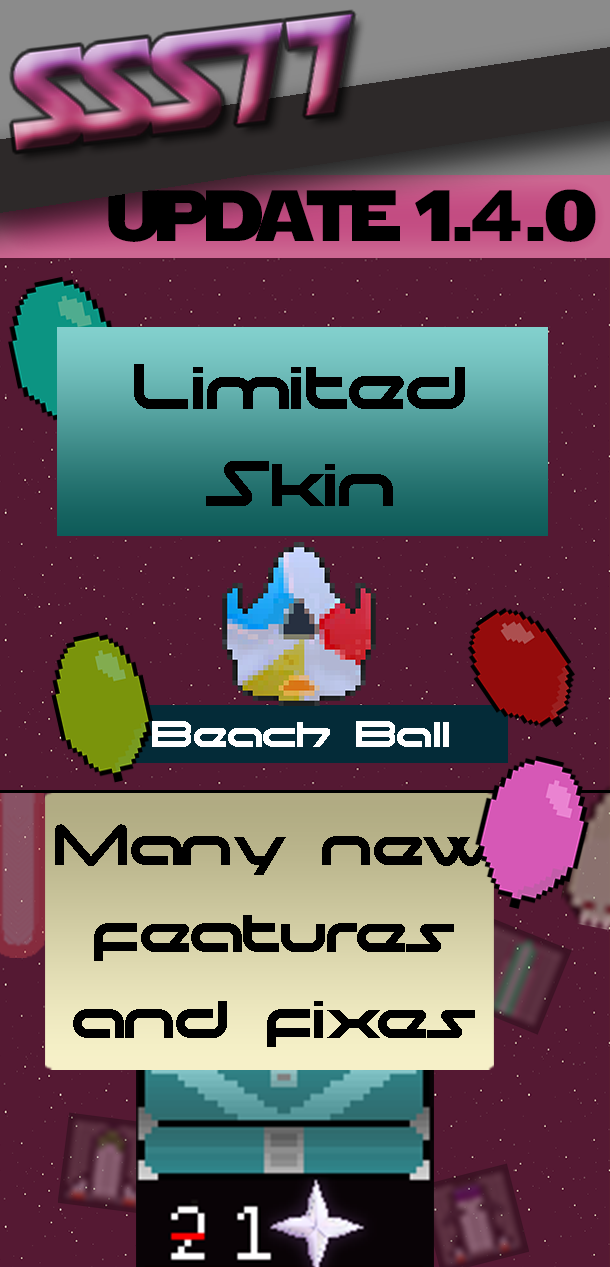
<style>
.page{position:relative;width:610px;height:1267px;background:#551933}
.page>*{position:absolute;margin:0}
.t1{font:72px "StarJedi";color:#000000}
.t2{font:81.6px "moonhouse";color:#000000}
.t3{font:48px "moonhouse";color:#ffffff}
.t4{font:72px "moonhouse";color:#000000}
</style>
<div class="page">
<p class="t1" style="left:108px;top:189px;width:488px;height:53px">update 1.4.0</p>
<p class="t2" style="left:134px;top:364px;width:331px;height:142px;text-align:center">Limited<br>Skin</p>
<p class="t3" style="left:152px;top:721px;width:297px;height:26px">Beach Ball</p>
<p class="t4" style="left:55px;top:824px;width:439px;height:223px;text-align:center">Many new<br>features<br>and fixes</p>
</div>
